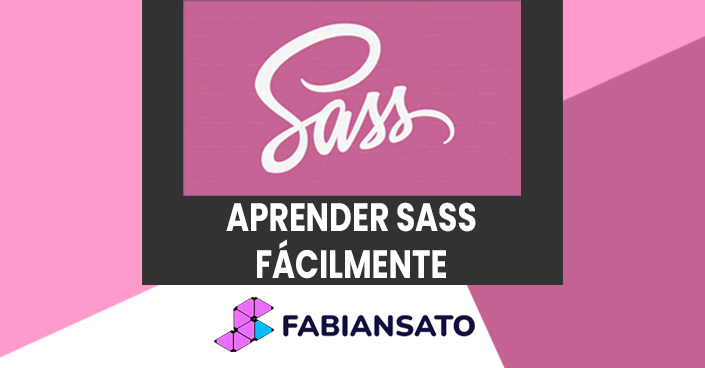
<style>
.page{position:relative;width:705px;height:368px;background:#ff9acd}
.page>*{position:absolute;margin:0}
.t1{font:39.6px "Poppins-Bold";color:#ffffff;scale:0.79 1}
</style>
<div class="page">
<p class="t1" style="left:226px;top:202px;width:250px;height:77px;text-align:center">APRENDER SASS<br>FÁCILMENTE</p>
</div>
